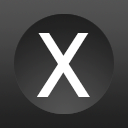
<style>
.page{position:relative;width:128px;height:128px}
.page>*{position:absolute;margin:0}
.t1{font:100px "Consolas";color:#ffffff}
</style>
<div class="page">
<p class="t1" style="left:37px;top:33px;width:53px;height:64px">X</p>
</div>
